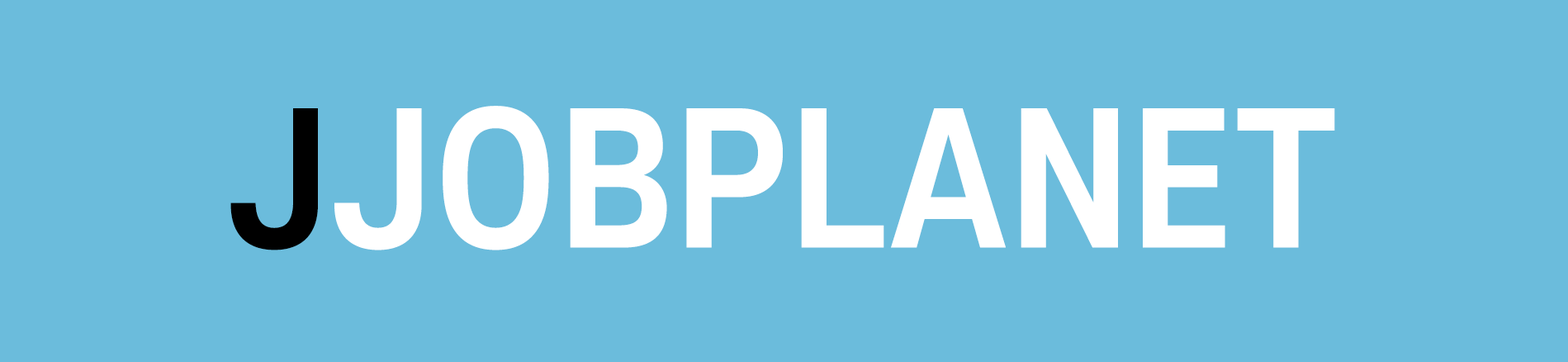
<style>
.page{position:relative;width:1568px;height:362px;background:#6bbcdc}
.page>*{position:absolute;margin:0}
.t1{font:175.5px "S-CoreDream-6Bold";letter-spacing:0.02em;color:#ffffff;scale:0.96 1}
.t2{font:175.5px "S-CoreDream-6Bold";letter-spacing:0.02em;color:#000000;scale:0.96 1}
</style>
<div class="page">
<p class="t1" style="left:230px;top:106px;width:1105px;height:144px"><span class="t2">J</span>JOBPLANET</p>
</div>
